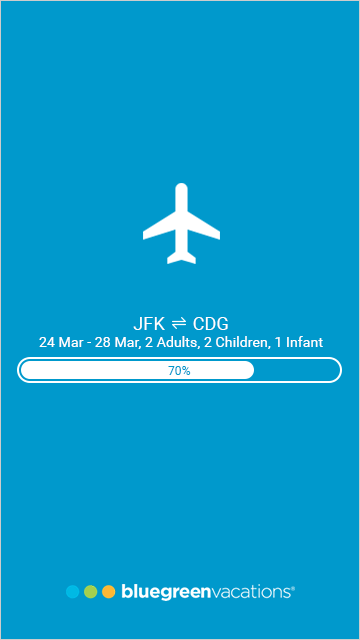
<style>
.page{position:relative;width:360px;height:640px;background:#0099cc}
.page>*{position:absolute;margin:0}
.t1{font:14px "Roboto-Regular";letter-spacing:0.01em;color:#ffffff}
.t2{font:18px "Roboto-Regular";letter-spacing:0.01em;color:#ffffff}
.t3{font:12px "Roboto-Regular";letter-spacing:0.01em;color:#0099cc}
</style>
<div class="page">
<p class="t1" style="left:39px;top:317px;width:284px;height:32px;text-align:center"><span class="t2">JFK      CDG<br></span>24 Mar - 28 Mar, 2 Adults, 2 Children, 1 Infant</p>
<p class="t3" style="left:168px;top:366px;width:23px;height:9px">70%</p>
</div>
